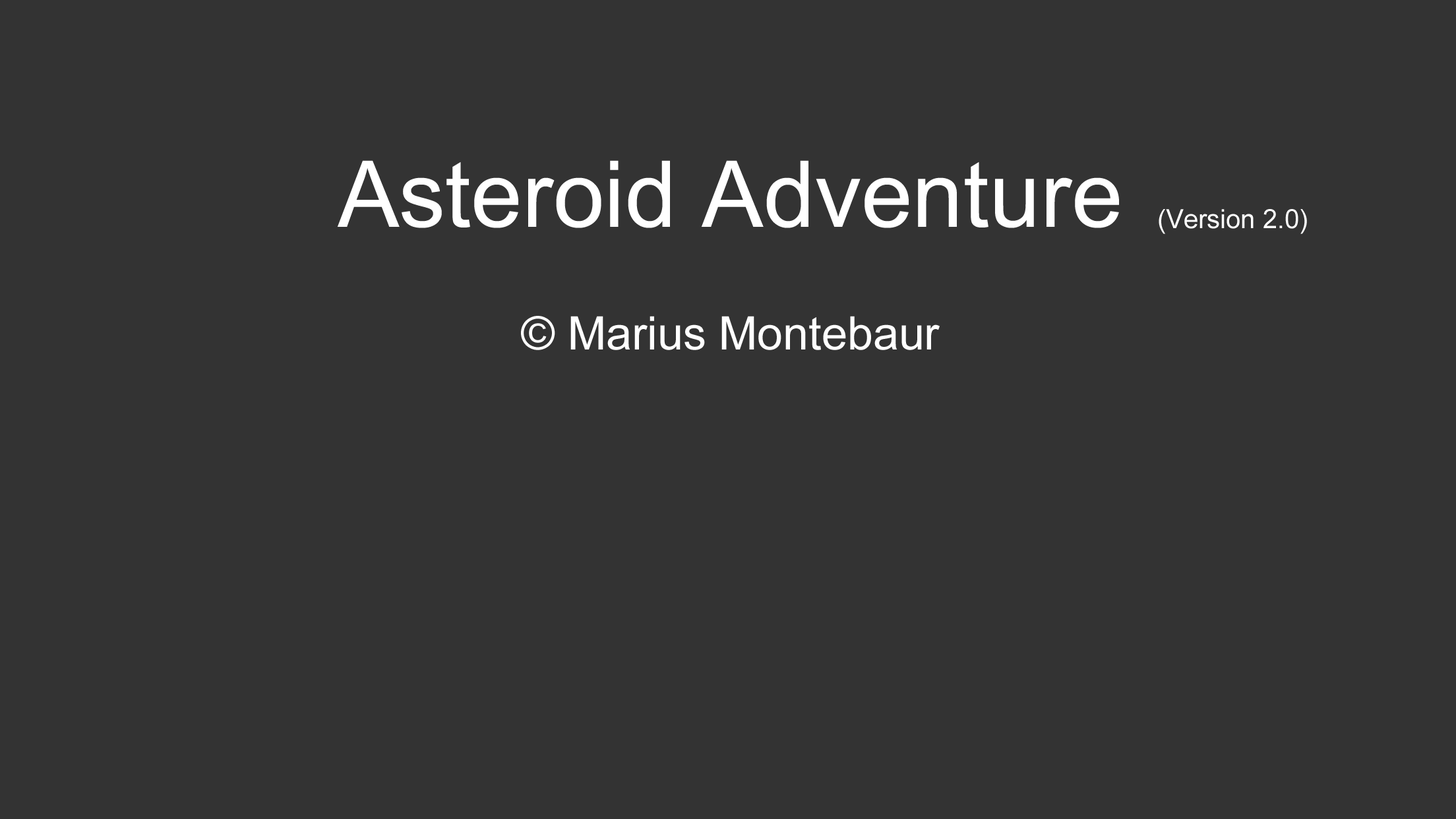
<style>
.page{position:relative;width:1456px;height:819px;background:#333333}
.page>*{position:absolute;margin:0}
.t1{font:46.2px/122.7px "ArialMT";color:#ffffff}
.t2{font:92.3px/19.8px "ArialMT";color:#ffffff}
.t3{font:92.3px/122.7px "ArialMT";color:#ffffff}
.t4{font:26.4px "ArialMT";color:#ffffff}
</style>
<div class="page">
<p class="t1" style="left:337px;top:160px;width:782px;height:190px;text-align:center"><span class="t2">Asteroi</span><span class="t3">d Adventure<br></span>© Marius Montebaur</p>
<p class="t4" style="left:1159px;top:209px;width:148px;height:25px">(Version 2.0)</p>
</div>
